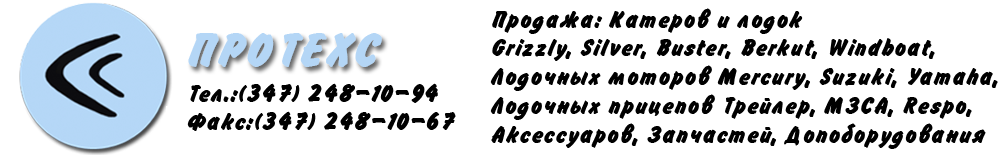
<style>
.page{position:relative;width:1000px;height:155px;background:#ffffff}
.page>*{position:absolute;margin:0}
.t1{font:24px "FlashBold";color:#000000}
.t2{font:48px "FlashBold";color:#b4d6f6;text-transform:uppercase}
</style>
<div class="page">
<p class="t1" style="left:490px;top:8px;width:508px;height:141px">Продажа: Катеров и лодок<br>Grizzly, Silver, Buster, Berkut, Windboat,<br>Лодочных моторов Mercury, Suzuki, Yamaha,<br>Лодочных прицепов Трейлер, МЗСА, Respo,<br>Аксессуаров, Запчастей, Допоборудования</p>
<p class="t2" style="left:188px;top:33px;width:194px;height:34px">Протехс</p>
<p class="t1" style="left:187px;top:83px;width:269px;height:48px">Тел.:(347) 248-10-94<br>Факс:(347) 248-10-67</p>
</div>
